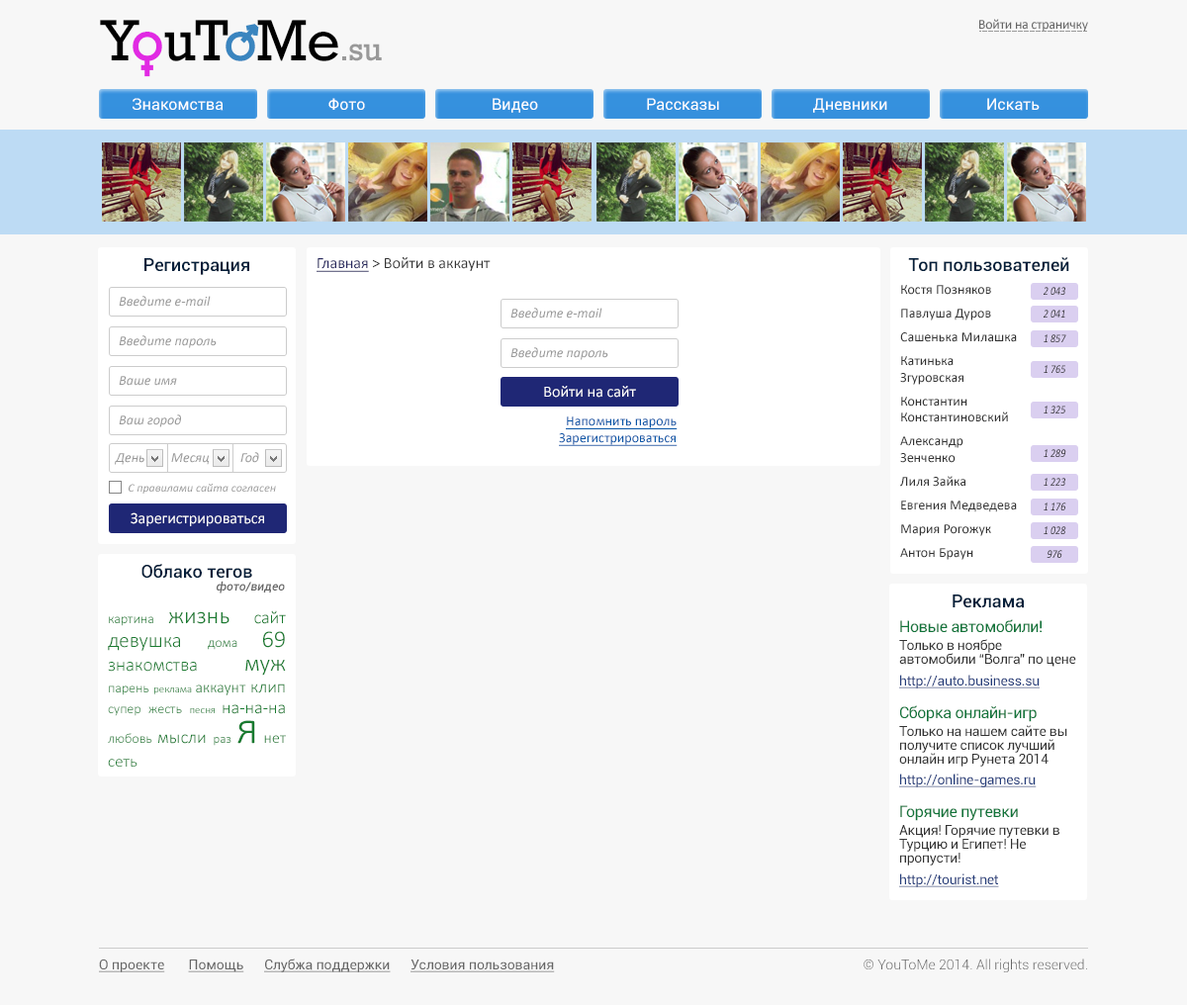
<style>
.page{position:relative;width:1187px;height:1005px;background:#f7f7f7}
.page>*{position:absolute;margin:0}
.t1{font:33.8px "Rockwell";letter-spacing:-0.02em;color:#999999}
.t2{font:59.2px "Rockwell";letter-spacing:-0.02em;color:#000000}
.t3{font:59.2px "Rockwell";letter-spacing:-0.02em;color:#e12ae3}
.t4{font:59.2px "Rockwell";letter-spacing:-0.02em;color:#3a85bf}
.t5{font:13.8px "Calibri";letter-spacing:-0.02em;color:#666666}
.t6{font:15.8px "Roboto-Regular";color:#ffffff}
.t7{font:15.8px "Calibri";color:#333333}
.t8{font:15.8px "Calibri";color:#25265d;text-decoration:underline}
.t9{font:17.8px "Roboto-Medium";color:#041f3a}
.t10{font:13.8px "Calibri";color:#333333}
.t11{font:11.9px "Calibri-Italic";color:#2d2d2d;scale:0.83 1}
.t12{font:13.8px "Calibri-Italic";color:#999999}
.t13{font:11.9px "Calibri-Italic";scale:0.83 1}
.t14{font:15.8px "Calibri";color:#ffffff}
.t15{font:13.8px "Calibri";color:#0756a7;text-decoration:underline}
.t16{font:11.9px "Calibri-Italic";color:#999999}
.t17{font:11.9px "Roboto-MediumItalic";color:#666666}
.t18{font:13.8px "Calibri-Light";color:#197b30}
.t19{font:23.7px "Calibri-Light";color:#197b30}
.t20{font:17.8px "Calibri-Light";color:#197b30}
.t21{font:20.8px/23.7px "Calibri-Light";color:#197b30}
.t22{font:13.8px/23.7px "Calibri-Light";color:#197b30}
.t23{font:23.7px/23.7px "Calibri-Light";color:#197b30}
.t24{font:18.8px/23.7px "Calibri-Light";color:#197b30}
.t25{font:10.9px "Calibri-Light";color:#197b30}
.t26{font:15.8px "Calibri-Light";color:#197b30}
.t27{font:12.9px/29.7px "Calibri-Light";color:#197b30}
.t28{font:47.5px/29.7px "Calibri-Light";color:#197b30}
.t29{font:15.8px/29.7px "Calibri-Light";color:#197b30}
.t30{font:16.8px/23.7px "Calibri-Light";color:#197b30}
.t31{font:15.8px "Roboto-Regular";letter-spacing:-0.02em;color:#11753b}
.t32{font:13.8px/13.8px "Roboto-Regular";letter-spacing:-0.02em;color:#333333}
.t33{font:13.8px "Roboto-Regular";letter-spacing:-0.02em;color:#233c7a;text-decoration:underline}
.t34{font:13.8px "Roboto-Regular";color:#666666;text-decoration:underline}
.t35{font:13.8px "Roboto-Light";color:#666666}
</style>
<div class="page">
<p class="t1" style="left:100px;top:20px;width:282px;height:41px"><span class="t2">Y</span><span class="t3">o</span><span class="t2">uT</span><span class="t4">o</span><span class="t2">Me</span>.su</p>
<p class="t5" style="left:979px;top:19px;width:109px;height:13px">Войти на страничку</p>
<p class="t6" style="left:133px;top:98px;width:91px;height:13px">Знакомства</p>
<p class="t6" style="left:328px;top:98px;width:37px;height:12px">Фото</p>
<p class="t6" style="left:493px;top:98px;width:45px;height:15px">Видео</p>
<p class="t6" style="left:647px;top:98px;width:72px;height:13px">Рассказы</p>
<p class="t6" style="left:813px;top:98px;width:74px;height:15px">Дневники</p>
<p class="t6" style="left:987px;top:98px;width:52px;height:13px">Искать</p>
<p class="t7" style="left:316px;top:257px;width:175px;height:15px"><span class="t8">Главная </span>&gt; Войти в аккаунт</p>
<p class="t9" style="left:908px;top:257px;width:161px;height:15px">Топ пользователей</p>
<p class="t9" style="left:144px;top:258px;width:105px;height:17px">Регистрация</p>
<p class="t10" style="left:900px;top:285px;width:117px;height:275px">Костя Позняков<br><br>Павлуша Дуров<br><br>Сашенька Милашка<br><br>Катинька Згуровская<br><br>Константин Константиновский<br><br>Александр Зенченко<br><br>Лиля Зайка<br><br>Евгения Медведева<br><br>Мария Рогожук<br><br>Антон Браун</p>
<p class="t11" style="left:1043px;top:287px;width:22px;height:8px">2 043</p>
<p class="t12" style="left:119px;top:296px;width:92px;height:11px">Введите e-mail</p>
<p class="t12" style="left:510px;top:308px;width:92px;height:10px">Введите e-mail</p>
<p class="t11" style="left:1043px;top:310px;width:22px;height:7px">2 041</p>
<p class="t12" style="left:119px;top:335px;width:98px;height:13px">Введите пароль</p>
<p class="t13" style="left:1043px;top:334px;width:23px;height:8px">1 857</p>
<p class="t12" style="left:510px;top:347px;width:98px;height:13px">Введите пароль</p>
<p class="t13" style="left:1043px;top:365px;width:22px;height:8px">1 765</p>
<p class="t12" style="left:119px;top:376px;width:58px;height:10px">Ваше имя</p>
<p class="t14" style="left:544px;top:386px;width:92px;height:12px">Войти на сайт</p>
<p class="t13" style="left:1043px;top:405px;width:22px;height:8px">1 325</p>
<p class="t12" style="left:119px;top:414px;width:62px;height:13px">Ваш город</p>
<p class="t15" style="left:559px;top:416px;width:118px;height:30px;text-align:right">Напомнить пароль<br>Зарегистрироваться</p>
<p class="t13" style="left:1043px;top:449px;width:23px;height:8px">1 289</p>
<p class="t12" style="left:115px;top:453px;width:29px;height:12px">День</p>
<p class="t12" style="left:171px;top:453px;width:38px;height:12px">Месяц</p>
<p class="t12" style="left:240px;top:452px;width:19px;height:11px">Год</p>
<p class="t16" style="left:129px;top:484px;width:147px;height:9px">С правилами сайта согласен</p>
<p class="t13" style="left:1043px;top:478px;width:22px;height:8px">1 223</p>
<p class="t11" style="left:1043px;top:502px;width:23px;height:8px">1 176</p>
<p class="t14" style="left:131px;top:512px;width:133px;height:14px">Зарегистрироваться</p>
<p class="t13" style="left:1043px;top:526px;width:23px;height:8px">1 028</p>
<p class="t13" style="left:1046px;top:550px;width:16px;height:8px">976</p>
<p class="t9" style="left:141px;top:564px;width:111px;height:15px">Облако тегов</p>
<p class="t17" style="left:217px;top:581px;width:68px;height:12px">фото/видео</p>
<p class="t9" style="left:952px;top:594px;width:73px;height:14px">Реклама</p>
<p class="t18" style="left:108px;top:610px;width:178px;height:156px;text-align:justify">картина <span class="t19">жизнь </span><span class="t20">сайт </span><span class="t21">девушка </span><span class="t22">дома </span><span class="t23">69 </span><span class="t24">знакомства </span><span class="t23">муж </span>парень <span class="t25">реклама </span><span class="t26">аккаунт </span><span class="t20">клип </span>супер жесть <span class="t25">песня </span><span class="t20">на-на-на </span>любовь <span class="t20">мысли </span><span class="t27">раз </span><span class="t28">я </span><span class="t29">нет </span><span class="t30">сеть</span></p>
<p class="t31" style="left:900px;top:619px;width:141px;height:14px">Новые автомобили!</p>
<p class="t32" style="left:899px;top:639px;width:177px;height:28px">Только в ноябре автомобили “Волга” по цене “Жигулей”</p>
<p class="t33" style="left:899px;top:674px;width:140px;height:14px">http://auto.business.su</p>
<p class="t31" style="left:900px;top:705px;width:136px;height:17px">Сборка онлайн-игр</p>
<p class="t32" style="left:899px;top:725px;width:168px;height:41px">Только на нашем сайте вы получите список лучший онлайн игр Рунета 2014 года</p>
<p class="t33" style="left:899px;top:773px;width:137px;height:14px">http://online-games.ru</p>
<p class="t31" style="left:900px;top:805px;width:118px;height:16px">Горячие путевки</p>
<p class="t32" style="left:899px;top:825px;width:160px;height:40px">Акция! Горячие путевки в Турцию и Египет! Не пропусти!</p>
<p class="t33" style="left:899px;top:873px;width:100px;height:14px">http://tourist.net</p>
<p class="t34" style="left:99px;top:958px;width:456px;height:14px">О проекте       Помощь      Слубжа поддержки      Условия пользования</p>
<p class="t35" style="left:863px;top:958px;width:224px;height:14px">© YouToMe 2014. All rights reserved.</p>
</div>
